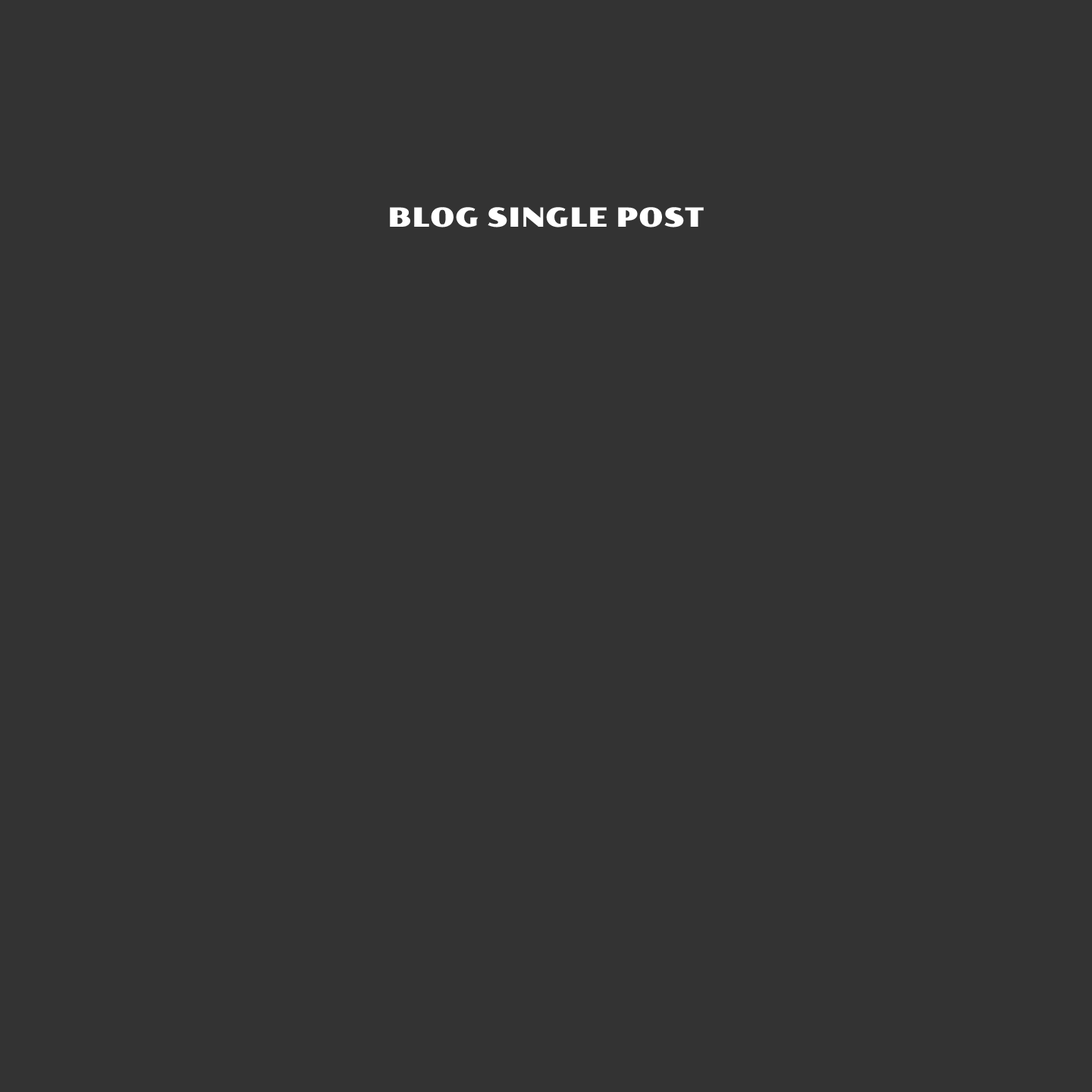
<style>
.page{position:relative;width:1092px;height:1092px;background:#333333}
.page>*{position:absolute;margin:0}
.t1{font:26.5px "PollerOne-Regular";letter-spacing:0.01em;color:#ffffff}
</style>
<div class="page">
<p class="t1" style="left:390px;top:207px;width:314px;height:20px">BLOG SINGLE POST</p>
</div>
